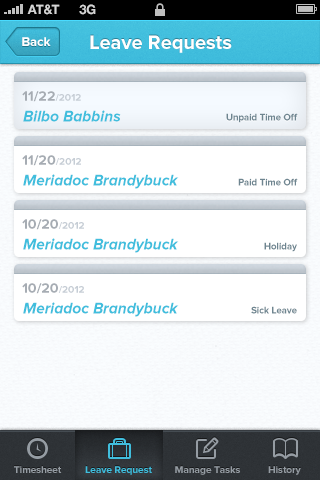
<style>
.page{position:relative;width:320px;height:480px;background:#ffffff}
.page>*{position:absolute;margin:0}
.t1{font:13px "HelveticaNeue-Bold";color:#d4d4d4;text-transform:uppercase}
.t2{font:13px "ProximaNova-Bold";color:#ffffff}
.t3{font:20px "ProximaNova-Bold";color:#ffffff}
.t4{font:14px "ProximaNova-Bold";color:#a6acb3}
.t5{font:10px "ProximaNova-Bold";color:#c6cdd5}
.t6{font:16px "ProximaNova-BoldIt";color:#41bedd;scale:0.97 1}
.t7{font:10px "ProximaNova-Bold";color:#6e8590;scale:0.95 1}
.t8{font:10px "ProximaNova-Bold";color:#959ca3}
.t9{font:10px "ProximaNova-Bold";color:#41bedd}
</style>
<div class="page">
<p class="t1" style="left:27px;top:4px;width:33px;height:11px">AT&amp;t</p>
<p class="t1" style="left:79px;top:4px;width:17px;height:11px">3G</p>
<p class="t2" style="left:22px;top:37px;width:29px;height:9px">Back</p>
<p class="t3" style="left:90px;top:35px;width:142px;height:18px">Leave Requests</p>
<p class="t4" style="left:22px;top:91px;width:59px;height:11px">11/22<span class="t5">/2012</span></p>
<p class="t6" style="left:23px;top:110px;width:98px;height:12px">Bilbo Babbins</p>
<p class="t7" style="left:226px;top:113px;width:72px;height:10px">Unpaid Time Off</p>
<p class="t4" style="left:22px;top:155px;width:59px;height:11px">11/20<span class="t5">/2012</span></p>
<p class="t6" style="left:23px;top:174px;width:156px;height:15px">Meriadoc Brandybuck</p>
<p class="t7" style="left:238px;top:178px;width:60px;height:8px">Paid Time Off</p>
<p class="t4" style="left:22px;top:219px;width:62px;height:11px">10/20<span class="t5">/2012</span></p>
<p class="t6" style="left:23px;top:238px;width:156px;height:15px">Meriadoc Brandybuck</p>
<p class="t7" style="left:264px;top:242px;width:33px;height:10px">Holiday</p>
<p class="t4" style="left:22px;top:283px;width:62px;height:11px">10/20<span class="t5">/2012</span></p>
<p class="t6" style="left:23px;top:302px;width:156px;height:15px">Meriadoc Brandybuck</p>
<p class="t7" style="left:251px;top:306px;width:46px;height:8px">Sick Leave</p>
<p class="t8" style="left:14px;top:466px;width:48px;height:7px">Timesheet</p>
<p class="t9" style="left:85px;top:466px;width:67px;height:9px">Leave Request</p>
<p class="t9" style="left:85px;top:466px;width:67px;height:9px">Leave Request</p>
<p class="t8" style="left:175px;top:466px;width:65px;height:9px">Manage Tasks</p>
<p class="t8" style="left:268px;top:466px;width:33px;height:9px">History</p>
</div>
